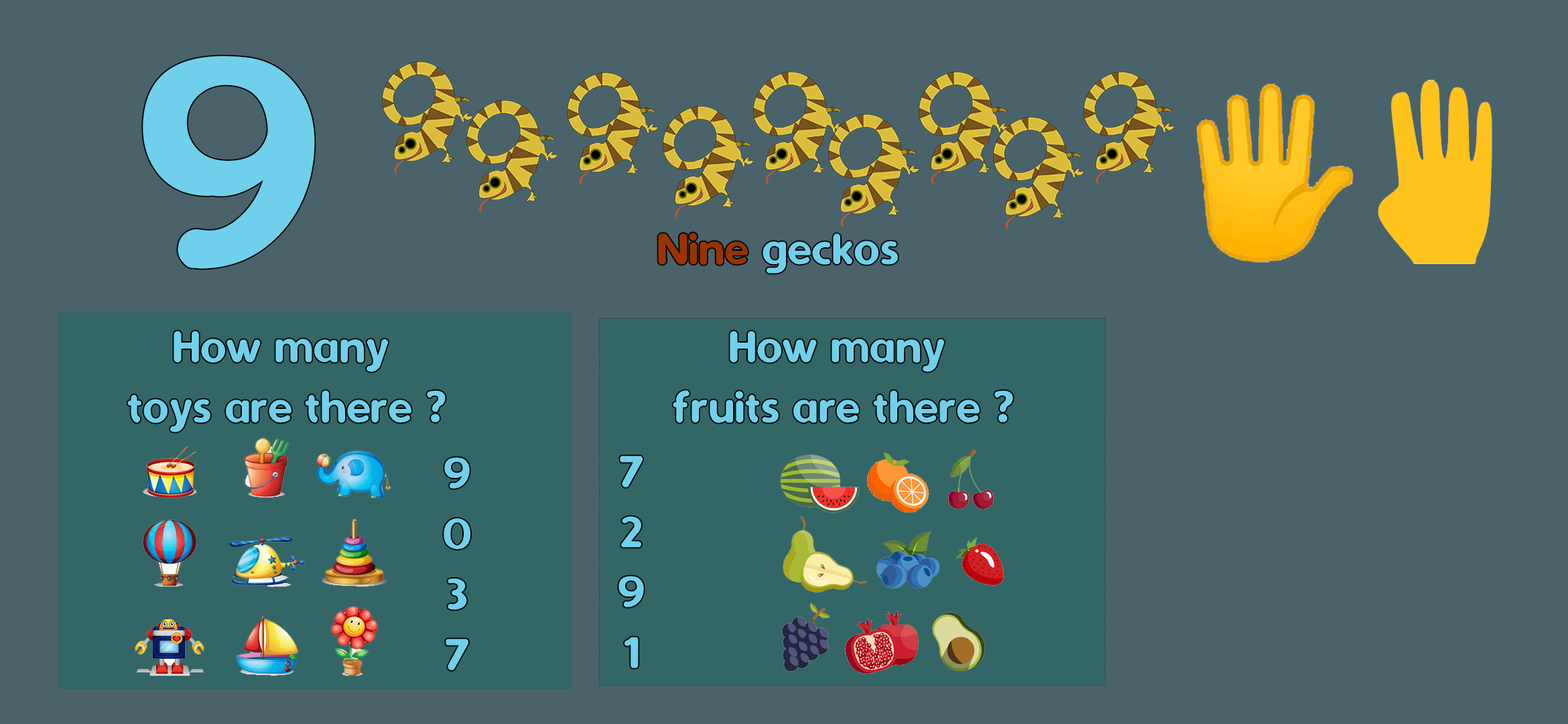
<style>
.page{position:relative;width:1568px;height:724px;background:#4a636b}
.page>*{position:absolute;margin:0}
.t1{font:345.7px "Dyuthi";color:#70d0eb}
.t2{font:50.3px "Dyuthi";color:#70d0eb}
.t3{font:50.3px "Dyuthi";color:#993300}
</style>
<div class="page">
<p class="t1" style="left:143px;top:56px;width:172px;height:213px">9</p>
<p class="t2" style="left:658px;top:233px;width:240px;height:40px"><span class="t3">Nine </span>geckos</p>
<p class="t2" style="left:127px;top:331px;width:319px;height:101px;text-align:center">How many <br>toys are there ?</p>
<p class="t2" style="left:673px;top:331px;width:340px;height:92px;text-align:center">How many <br>fruits are there ?</p>
<p class="t2" style="left:444px;top:457px;width:26px;height:213px;text-align:center">9<br>0<br>3<br>7</p>
<p class="t2" style="left:618px;top:456px;width:26px;height:212px;text-align:center">7<br>2<br>9<br>1</p>
</div>
